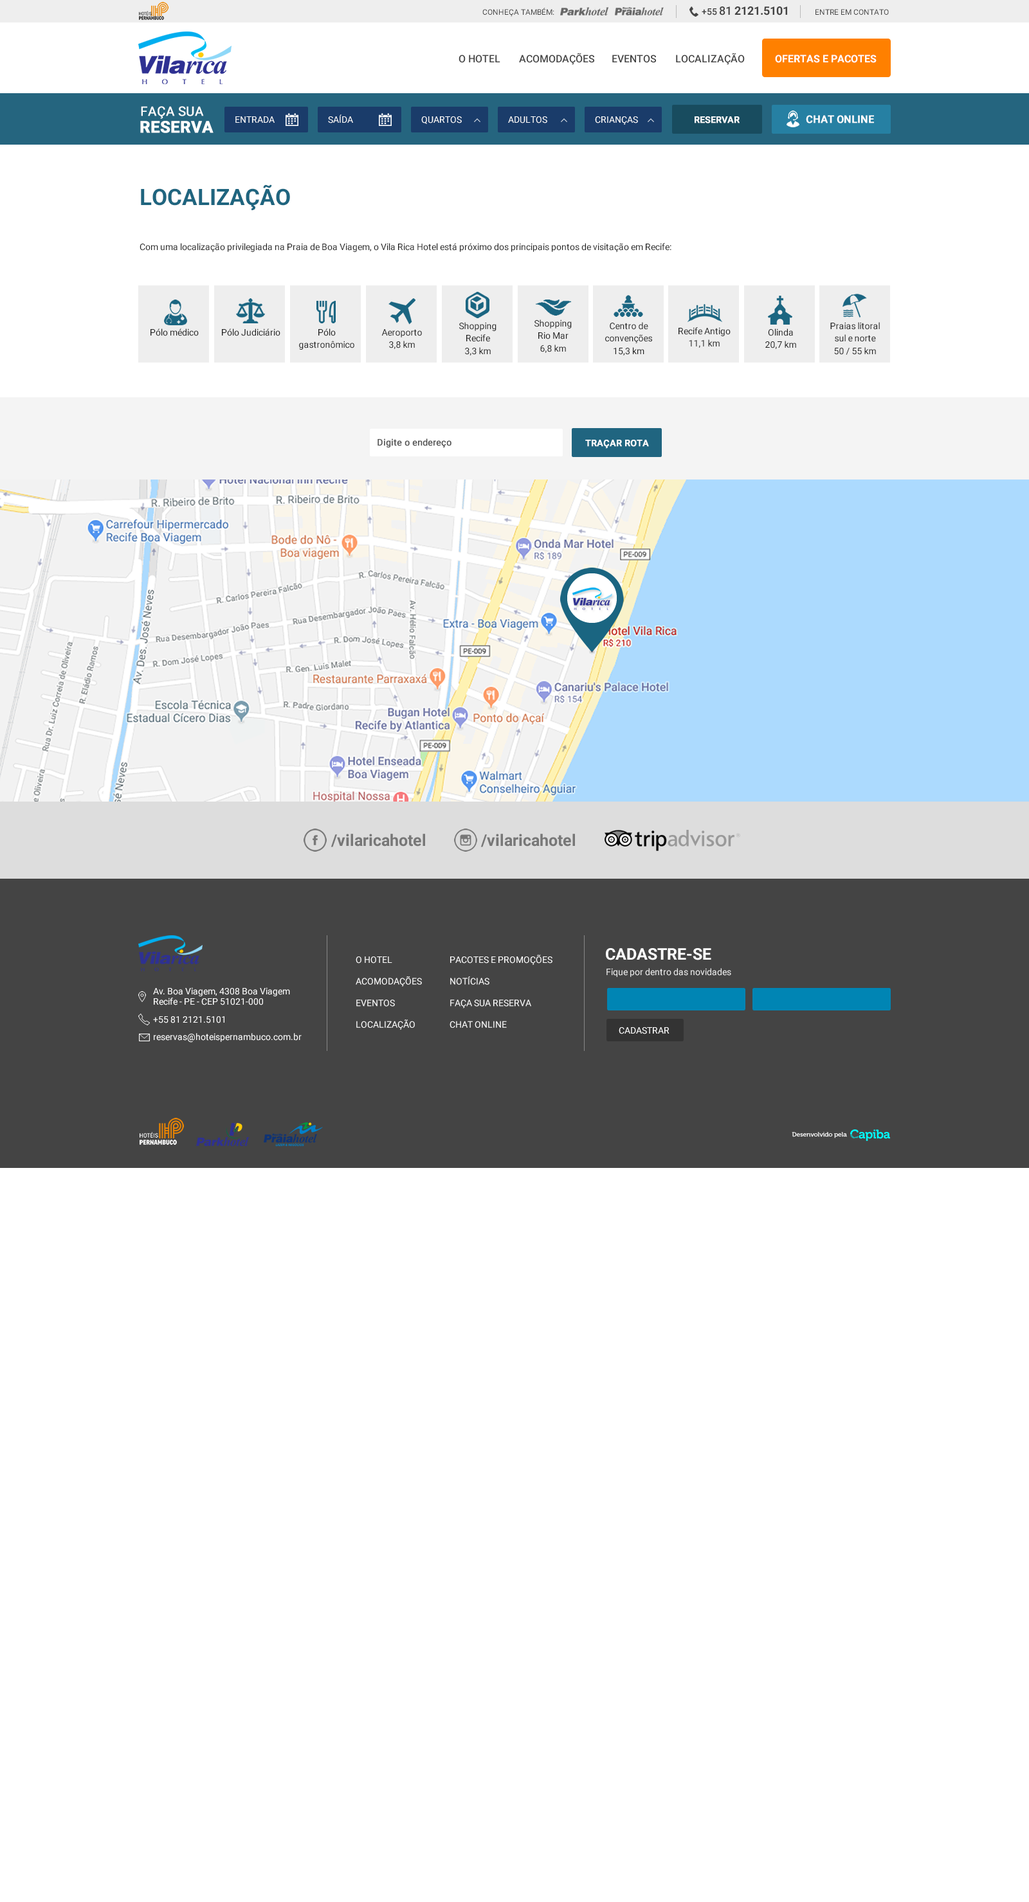
<style>
.page{position:relative;width:1029px;height:1902px;background:#ffffff}
.page>*{position:absolute;margin:0}
.t1{font:7.7px "Roboto-Regular";color:#444444}
.t2{font:11.6px "Roboto-Bold";color:#444444}
.t3{font:9px "Roboto-Medium";color:#444444}
.t4{font:11.6px "Roboto-Medium";color:#444444}
.t5{font:10.3px "Roboto-Medium";color:#444444}
.t6{font:10.3px "Roboto-Bold";color:#ffffff}
.t7{font:12.9px "Roboto-Regular";color:#ffffff;font-weight:bold}
.t8{font:16.1px "Roboto-Bold";color:#ffffff;font-weight:bold}
.t9{font:9px "Roboto-Regular";color:#ffffff}
.t10{font:9px "Roboto-Medium";color:#ffffff;font-weight:bold}
.t11{font:10.3px "Roboto-Medium";color:#ffffff;font-weight:bold}
.t12{font:22.5px "Roboto-Bold";color:#1f657f}
.t13{font:9px "Roboto-Regular";color:#202020}
.t14{font:9px/12.6px "Roboto-Regular";color:#202020}
.t15{font:9px "Roboto-Regular";color:#555555;font-weight:bold}
.t16{font:16.1px "Roboto-Bold";color:#ffffff}
.t17{font:9px/10.8px "Roboto-Regular";color:#ffffff}
.t18{font:9px "Roboto-Regular";color:#eeeeee}
</style>
<div class="page">
<p class="t1" style="left:482px;top:8px;width:72px;height:9px">CONHEÇA TAMBÉM:</p>
<p class="t2" style="left:701px;top:6px;width:86px;height:9px"><span class="t3">+55 </span><span class="t4">81 </span>2121.5101</p>
<p class="t1" style="left:815px;top:9px;width:73px;height:6px">ENTRE EM CONTATO</p>
<p class="t5" style="left:519px;top:53px;width:76px;height:12px">ACOMODAÇÕES</p>
<p class="t5" style="left:676px;top:53px;width:68px;height:12px">LOCALIZAÇÃO</p>
<p class="t5" style="left:458px;top:55px;width:42px;height:8px">O HOTEL</p>
<p class="t5" style="left:612px;top:55px;width:44px;height:8px">EVENTOS</p>
<p class="t6" style="left:775px;top:55px;width:101px;height:8px">OFERTAS E PACOTES</p>
<p class="t7" style="left:141px;top:106px;width:63px;height:13px">FAÇA SUA</p>
<p class="t8" style="left:140px;top:121px;width:73px;height:12px">RESERVA</p>
<p class="t9" style="left:235px;top:116px;width:39px;height:7px">ENTRADA</p>
<p class="t9" style="left:328px;top:114px;width:25px;height:9px">SAÍDA</p>
<p class="t9" style="left:421px;top:116px;width:41px;height:8px">QUARTOS</p>
<p class="t9" style="left:508px;top:116px;width:39px;height:7px">ADULTOS</p>
<p class="t9" style="left:595px;top:116px;width:43px;height:9px">CRIANÇAS</p>
<p class="t10" style="left:694px;top:116px;width:45px;height:7px">RESERVAR</p>
<p class="t11" style="left:806px;top:115px;width:68px;height:8px">CHAT ONLINE</p>
<p class="t12" style="left:141px;top:184px;width:149px;height:26px">LOCALIZAÇÃO</p>
<p class="t13" style="left:140px;top:243px;width:531px;height:9px">Com uma localização privilegiada na Praia de Boa Viagem, o Vila Rica Hotel está próximo dos principais pontos de visitação em Recife:</p>
<p class="t13" style="left:150px;top:328px;width:49px;height:8px">Pólo médico</p>
<p class="t13" style="left:222px;top:328px;width:58px;height:8px">Pólo Judiciário</p>
<p class="t14" style="left:299px;top:328px;width:55px;height:22px;text-align:center">Pólo<br>gastronômico</p>
<p class="t14" style="left:381px;top:329px;width:41px;height:20px;text-align:center">Aeroporto<br>3,8 km</p>
<p class="t14" style="left:459px;top:322px;width:37px;height:34px;text-align:center">Shopping<br>Recife<br>3,3 km</p>
<p class="t14" style="left:534px;top:320px;width:38px;height:33px;text-align:center">Shopping<br>Rio Mar<br>6,8 km</p>
<p class="t14" style="left:605px;top:322px;width:47px;height:34px;text-align:center">Centro de<br>convenções <br>15,3 km</p>
<p class="t14" style="left:678px;top:327px;width:52px;height:21px;text-align:center">Recife Antigo<br>11,1 km</p>
<p class="t14" style="left:765px;top:328px;width:31px;height:21px;text-align:center">Olinda<br>20,7 km</p>
<p class="t14" style="left:830px;top:322px;width:49px;height:33px;text-align:center">Praias litoral <br>sul e norte<br>50 / 55 km</p>
<p class="t15" style="left:377px;top:438px;width:74px;height:10px">Digite o endereço</p>
<p class="t10" style="left:585px;top:440px;width:64px;height:9px">TRAÇAR ROTA</p>
<p class="t16" style="left:606px;top:948px;width:105px;height:12px">CADASTRE-SE</p>
<p class="t17" style="left:356px;top:957px;width:66px;height:73px">O HOTEL<br><br>ACOMODAÇÕES<br><br>EVENTOS<br><br>LOCALIZAÇÃO</p>
<p class="t17" style="left:449px;top:955px;width:103px;height:73px">PACOTES E PROMOÇÕES<br><br>NOTÍCIAS<br><br>FAÇA SUA RESERVA<br><br>CHAT ONLINE</p>
<p class="t18" style="left:606px;top:968px;width:125px;height:9px">Fique por dentro das novidades</p>
<p class="t17" style="left:153px;top:987px;width:137px;height:18px">Av. Boa Viagem, 4308 Boa Viagem<br>Recife - PE - CEP 51021-000</p>
<p class="t9" style="left:153px;top:1016px;width:71px;height:7px">+55 81 2121.5101</p>
<p class="t9" style="left:154px;top:1033px;width:148px;height:10px">reservas@hoteispernambuco.com.br</p>
<p class="t9" style="left:618px;top:1027px;width:51px;height:7px">CADASTRAR</p>
</div>
